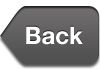
<style>
.page{position:relative;width:100px;height:70px;background:#ffffff}
.page>*{position:absolute;margin:0}
.t1{font:24px "HelveticaNeue-Bold";color:#ffffff}
</style>
<div class="page">
<p class="t1" style="left:26px;top:26px;width:57px;height:19px">Back</p>
</div>
